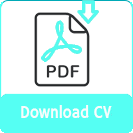
<style>
.page{position:relative;width:133px;height:133px;background:#ffffff}
.page>*{position:absolute;margin:0}
.t1{font:18px "HammersmithOne-Regular";color:#fafcfc;scale:0.84 1}
</style>
<div class="page">
<p class="t1" style="left:21px;top:105px;width:91px;height:13px">Download CV</p>
</div>
